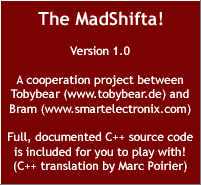
<style>
.page{position:relative;width:201px;height:185px;background:#7b0000}
.page>*{position:absolute;margin:0}
.t1{font:18px "TrebuchetMS-Bold";color:#ffffff}
.t2{font:12px "TrebuchetMS";color:#ffffff}
</style>
<div class="page">
<p class="t1" style="left:38px;top:11px;width:125px;height:15px">The MadShifta!</p>
<p class="t2" style="left:8px;top:46px;width:185px;height:127px;text-align:center">Version 1.0<br><br>A cooperation project between<br>Tobybear (www.tobybear.de) and<br>Bram (www.smartelectronix.com)<br><br>Full, documented C++ source code<br>is included for you to play with!<br>(C++ translation by Marc Poirier)</p>
</div>
